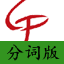
<style>
.page{position:relative;width:64px;height:64px;background:#ffffff}
.page>*{position:absolute;margin:0}
.t1{font:18px "¿¬Ìå";color:#000000}
</style>
<div class="page">
<p class="t1" style="left:7px;top:44px;width:53px;height:17px">分词版</p>
</div>
